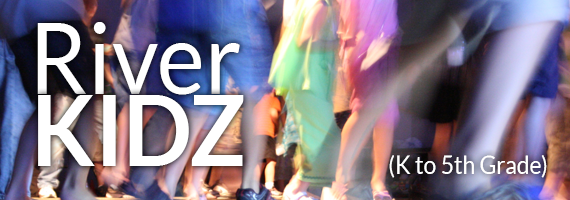
<style>
.page{position:relative;width:570px;height:200px}
.page>*{position:absolute;margin:0}
.t1{font:98.3px "Lato-Regular";color:#ffffff;scale:0.93 1}
.t2{font:98.4px "Lato-Bold";color:#ffffff;text-transform:uppercase;scale:0.93 1}
.t3{font:24.6px "Lato-Regular";color:#ffffff;scale:0.93 1}
</style>
<div class="page">
<p class="t1" style="left:37px;top:22px;width:203px;height:73px">River</p>
<p class="t2" style="left:38px;top:95px;width:206px;height:71px">kidz</p>
<p class="t3" style="left:389px;top:155px;width:158px;height:23px">(K to 5th Grade)</p>
</div>
